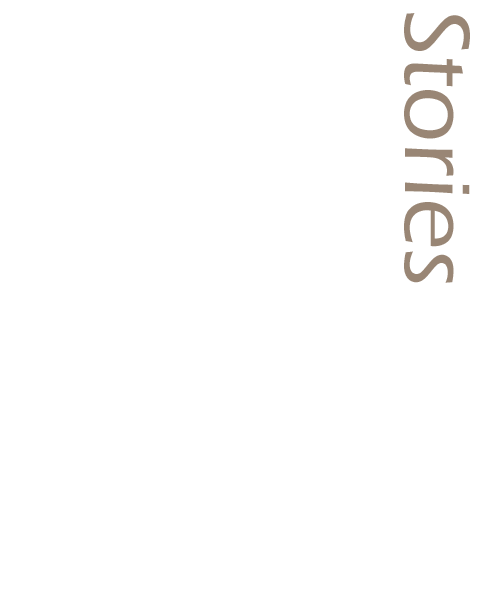
<style>
.page{position:relative;width:480px;height:600px;background:#ffffff}
.page>*{position:absolute;margin:0}
.t1{font:96px "ErasITC-Medium";color:#998675}
</style>
<div class="page">
<p class="t1" style="left:404px;top:13px;width:66px;height:270px;rotate:90deg">Stories</p>
</div>
